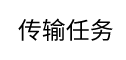
<style>
.page{position:relative;width:126px;height:60px;background:#ffffff}
.page>*{position:absolute;margin:0}
.t1{font:24px "SourceHanSansCN-Regular";color:#000000}
</style>
<div class="page">
<p class="t1" style="left:18px;top:18px;width:95px;height:23px">传输任务</p>
</div>
